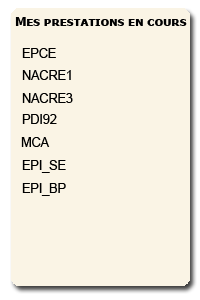
<style>
.page{position:relative;width:200px;height:300px;background:#faf4e5}
.page>*{position:absolute;margin:0}
.t1{font:12.5px "TahomaSmallCap-Bold";color:#000001}
.t2{font:12.5px "ArialMT";color:#000000}
.t3{font:12.5px "ArialMT";color:#010101}
</style>
<div class="page">
<p class="t1" style="left:15px;top:17px;width:172px;height:9px">Mes prestations en cours</p>
<p class="t2" style="left:22px;top:48px;width:34px;height:10px">EPCE</p>
<p class="t3" style="left:22px;top:70px;width:49px;height:10px">NACRE1</p>
<p class="t2" style="left:22px;top:93px;width:51px;height:10px">NACRE3</p>
<p class="t2" style="left:22px;top:114px;width:35px;height:10px">PDI92</p>
<p class="t2" style="left:21px;top:137px;width:29px;height:10px">MCA</p>
<p class="t2" style="left:22px;top:160px;width:44px;height:13px">EPI_SE</p>
<p class="t2" style="left:22px;top:183px;width:44px;height:13px">EPI_BP</p>
</div>
